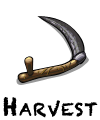
<style>
.page{position:relative;width:100px;height:120px;background:#ffffff}
.page>*{position:absolute;margin:0}
.t1{font:24px "Chalkduster";letter-spacing:0.05em;color:#000000;font-variant:small-caps;font-weight:bold}
</style>
<div class="page">
<p class="t1" style="left:3px;top:97px;width:95px;height:21px">Harvest</p>
</div>
